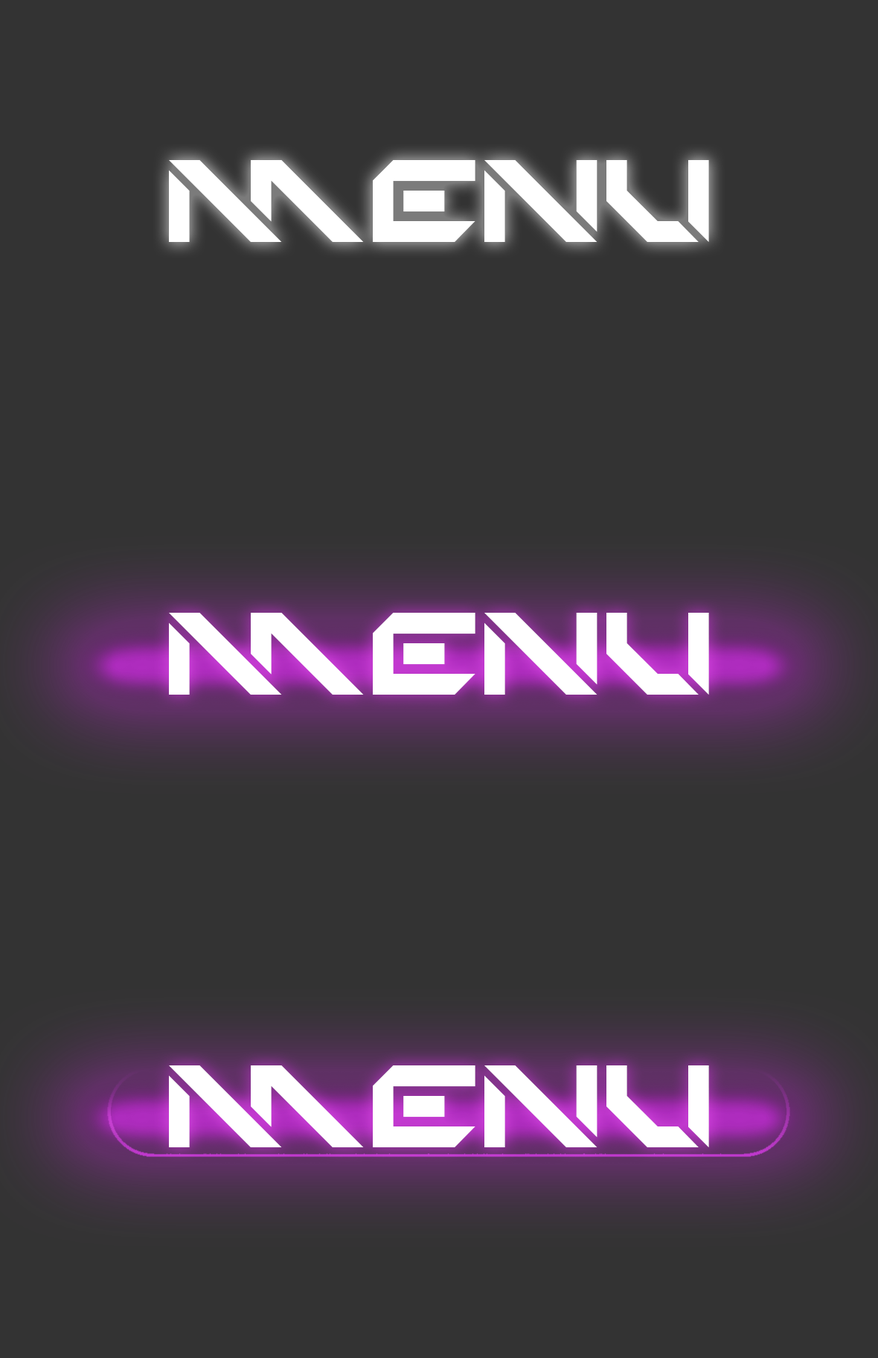
<style>
.page{position:relative;width:878px;height:1358px;background:#333333}
.page>*{position:absolute;margin:0}
.t1{font:163.5px "TechnoHideo";color:#ffffff}
</style>
<div class="page">
<p class="t1" style="left:169px;top:160px;width:540px;height:82px">MENU</p>
<p class="t1" style="left:169px;top:613px;width:540px;height:81px">MENU</p>
<p class="t1" style="left:169px;top:1065px;width:540px;height:82px">MENU</p>
</div>
